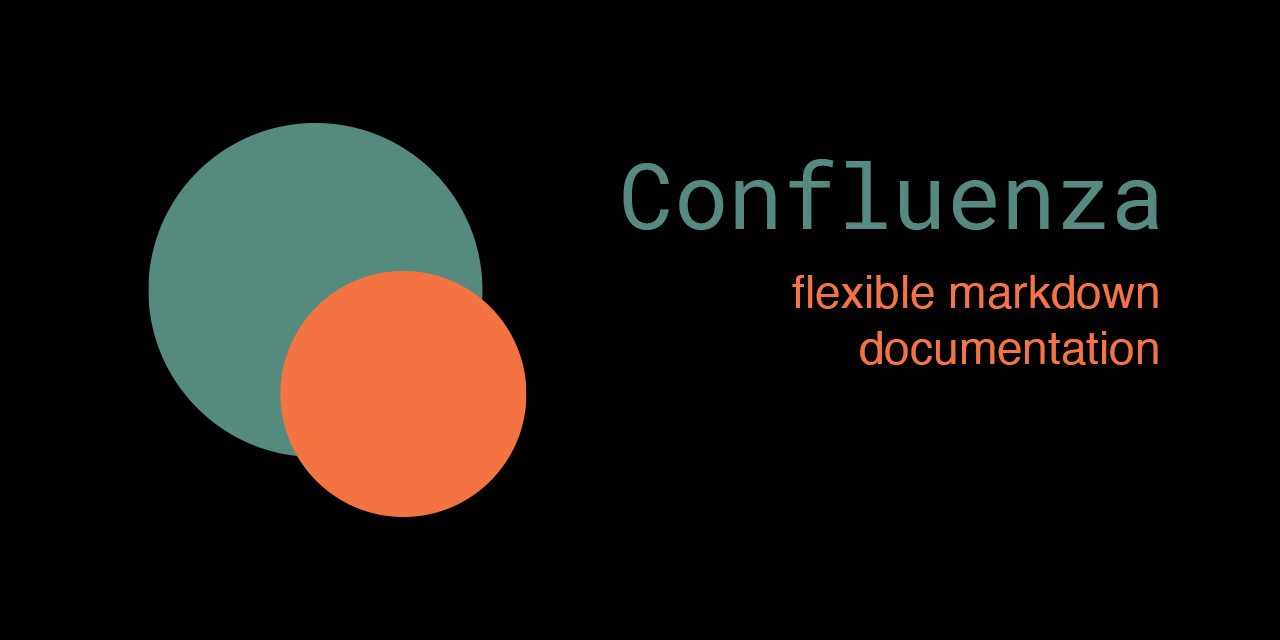
<style>
.page{position:relative;width:1280px;height:640px;background:#000000}
.page>*{position:absolute;margin:0}
.t1{font:91px "RobotoMono-Regular";color:#568a80}
.t2{font:46px "Helvetica";color:#f57344}
</style>
<div class="page">
<p class="t1" style="left:623px;top:159px;width:535px;height:71px">Confluenza</p>
<p class="t2" style="left:792px;top:275px;width:366px;height:90px;text-align:right">flexible markdown<br>documentation</p>
</div>
